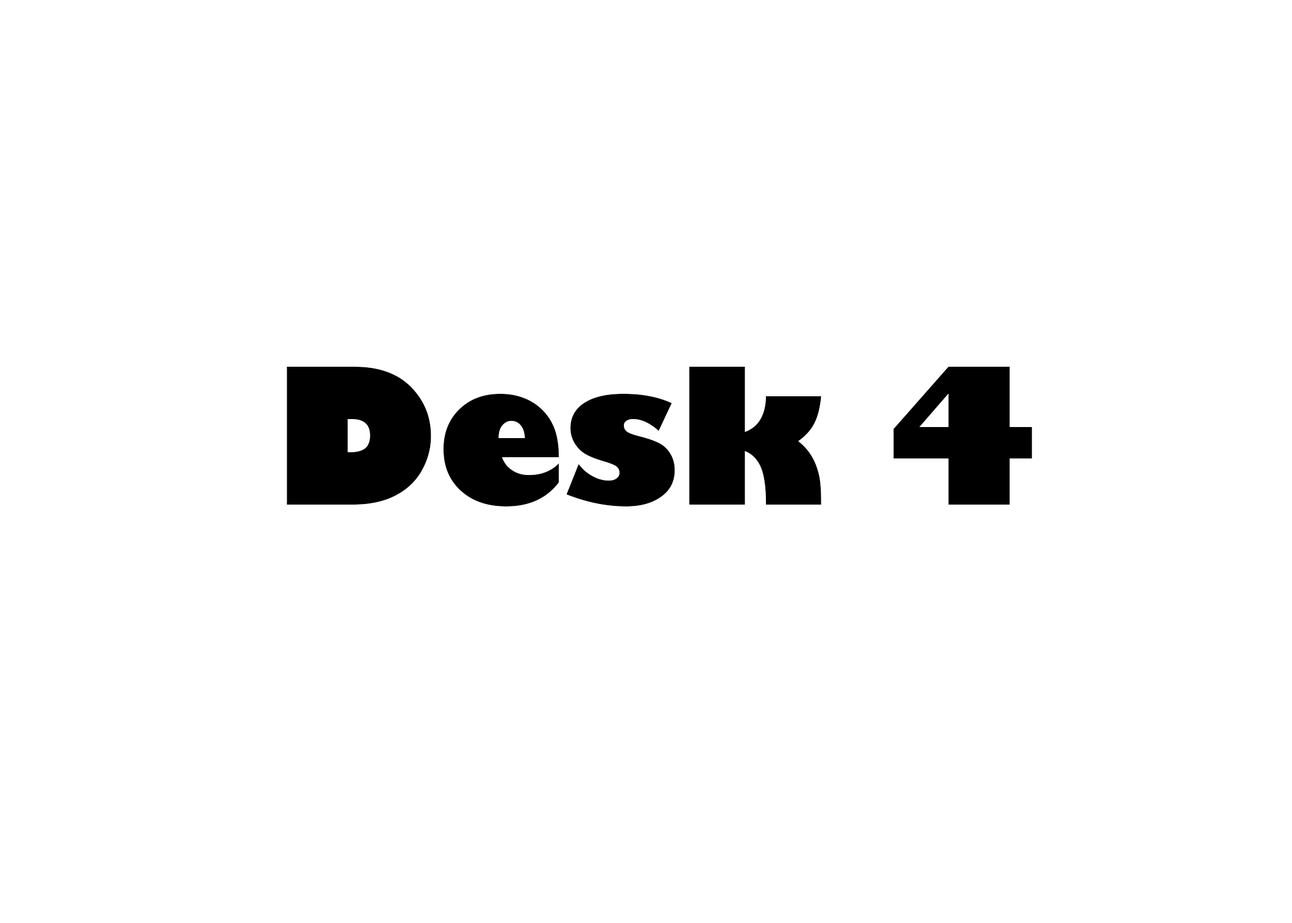
<style>
.page{position:relative;width:1292px;height:923px;background:#ffffff}
.page>*{position:absolute;margin:0}
.t1{font:184.6px "GillSans-UltraBold";color:#000000}
</style>
<div class="page">
<p class="t1" style="left:287px;top:367px;width:745px;height:139px">Desk 4</p>
</div>
